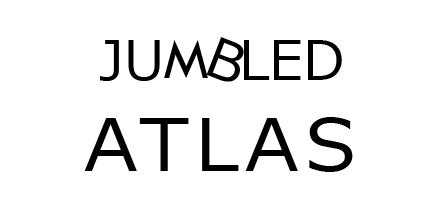
<style>
.page{position:relative;width:443px;height:218px;background:#ffffff}
.page>*{position:absolute;margin:0}
.t1{font:55px "Meiryo";color:#000000}
.t2{font:60px "TwCenMT-Regular";color:#000000}
.t3{font:72px "Meiryo";letter-spacing:0.075em;color:#000000;scale:1.1 1}
</style>
<div class="page">
<p class="t1" style="left:100px;top:40px;width:242px;height:41px">JU    LED</p>
<p class="t2" style="left:164px;top:40px;width:44px;height:38px">M</p>
<p class="t1" style="left:206px;top:37px;width:38px;height:45px;rotate:21deg">B</p>
<p class="t3" style="left:84px;top:117px;width:269px;height:55px">ATLAS</p>
</div>
